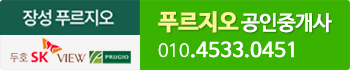
<style>
.page{position:relative;width:350px;height:70px;background:#3ab300}
.page>*{position:absolute;margin:0}
.t1{font:20.2px "NanumBarunGothicOTF";letter-spacing:-0.025em;color:#ffffff;font-weight:bold}
.t2{font:22.5px "NanumBarunGothicOTFBold";letter-spacing:-0.025em;color:#fdf598;font-weight:bold}
.t3{font:19.5px "NanumBarunGothicOTF";color:#ffffff;font-weight:bold}
.t4{font:17.4px "NanumBarunGothicOTFUltraLight";color:#ffffff;font-weight:bold}
</style>
<div class="page">
<p class="t1" style="left:158px;top:11px;width:174px;height:22px"><span class="t2">푸르지오 </span>공인중개사</p>
<p class="t3" style="left:158px;top:41px;width:136px;height:17px"><span class="t4">010</span>.4533.0451</p>
</div>
